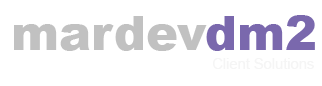
<style>
.page{position:relative;width:322px;height:86px;background:#ffffff}
.page>*{position:absolute;margin:0}
.t1{font:48px "Arial-Black";color:#c2c2c2}
.t2{font:48px "Arial-Black";color:#7a68ae}
</style>
<div class="page">
<p class="t1" style="left:14px;top:15px;width:301px;height:36px">mardev<span class="t2">dm2</span></p>
</div>
